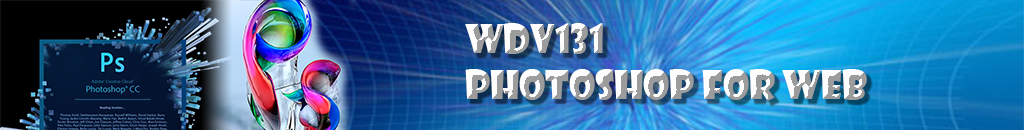
<style>
.page{position:relative;width:1024px;height:130px}
.page>*{position:absolute;margin:0}
.t1{font:37.8px "ShowcardGothic-Reg"}
</style>
<div class="page">
<p class="t1" style="left:465px;top:23px;width:402px;height:78px">WDV131<br>PHotoshop for Web</p>
</div>
